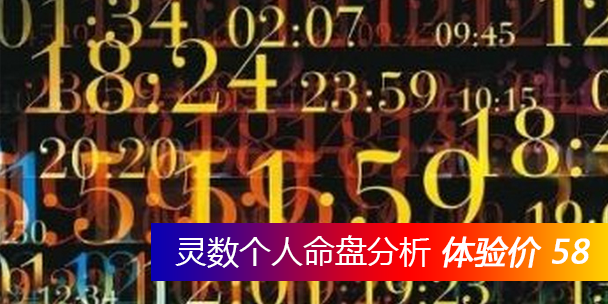
<style>
.page{position:relative;width:608px;height:304px}
.page>*{position:absolute;margin:0}
.t1{font:32px "MicrosoftYaHei";color:#ffffff}
.t2{font:32px "MicrosoftYaHei";color:#ffffff;font-weight:bold;font-style:italic}
</style>
<div class="page">
<p class="t1" style="left:175px;top:235px;width:415px;height:33px">灵数个人命盘分析 <span class="t2">体验价 58</span></p>
</div>
